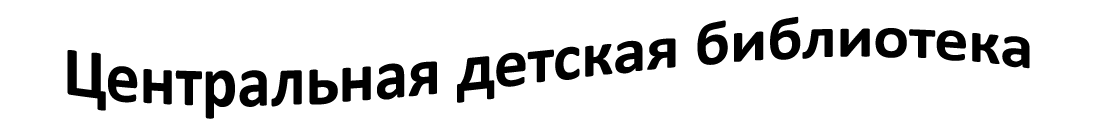
<style>
.page{position:relative;width:1096px;height:132px;background:#ffffff}
.page>*{position:absolute;margin:0}
.t1{font:66.7px "Calibri-Bold";color:#000000}
</style>
<div class="page">
<p class="t1" style="left:67px;top:16px;width:963px;height:103px">Центральная детская библиотека</p>
</div>
